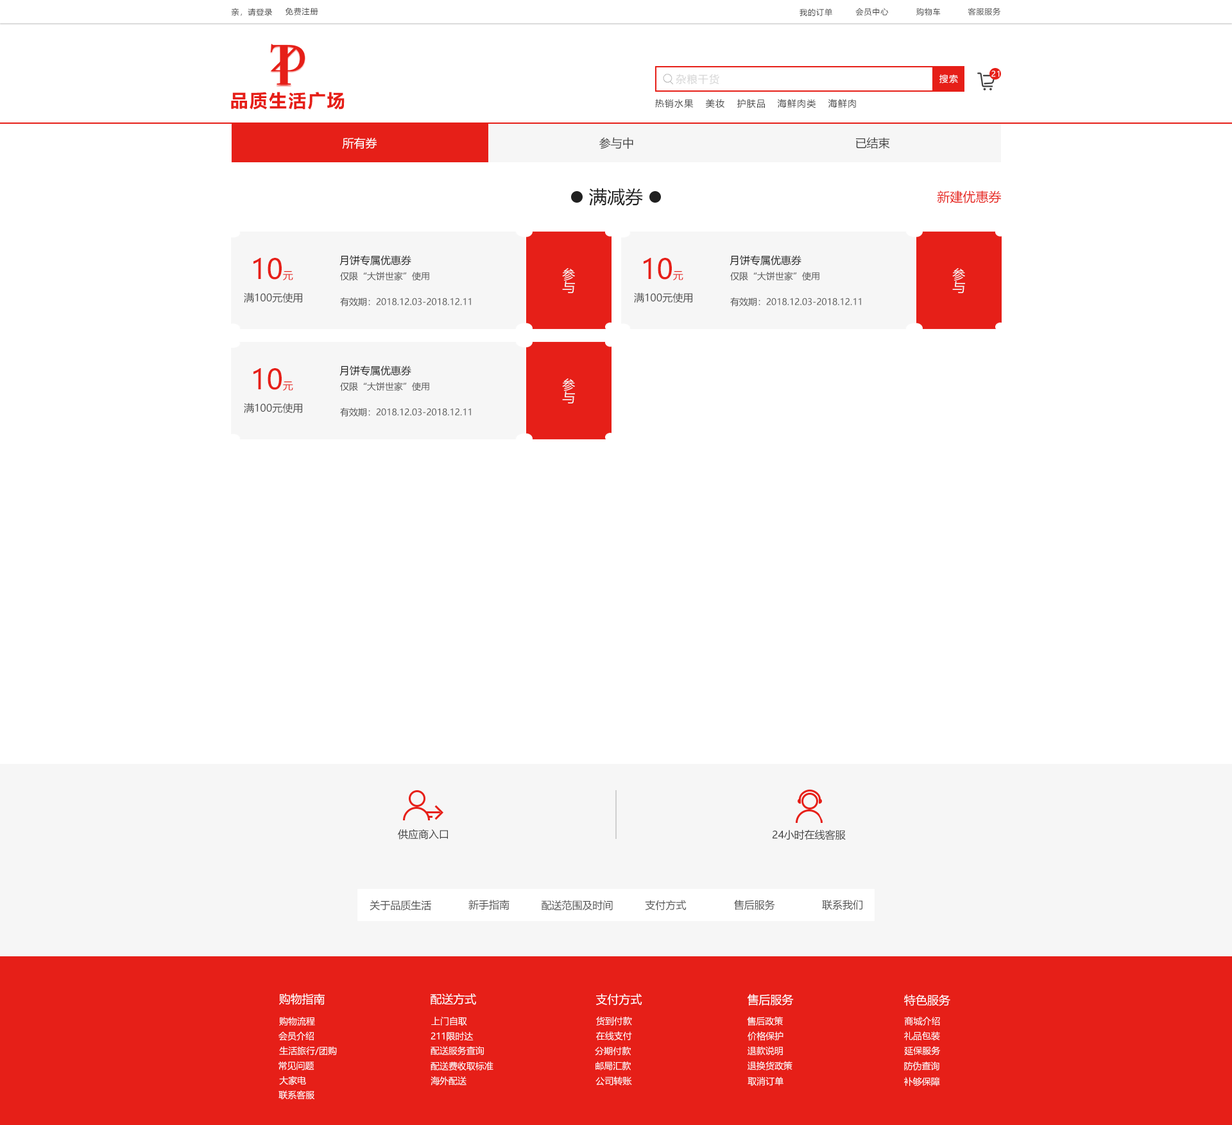
<style>
.page{position:relative;width:1232px;height:1125px;background:#ffffff}
.page>*{position:absolute;margin:0}
.t1{font:7.7px "MicrosoftYaHei";letter-spacing:0.08em;color:#404040}
.t2{font:10.3px "MicrosoftYaHei";letter-spacing:0.08em;color:#d6d6d6}
.t3{font:9px "MicrosoftYaHei";letter-spacing:0.08em;color:#ffffff}
.t4{font:7.7px "MicrosoftYaHei";letter-spacing:0.08em;color:#ffffff}
.t5{font:18px "MicrosoftYaHei-Bold";letter-spacing:0.08em;color:#e61f18}
.t6{font:9px "MicrosoftYaHei";letter-spacing:0.08em;color:#404040}
.t7{font:11.5px "MicrosoftYaHei";color:#ffffff}
.t8{font:11.5px "MicrosoftYaHei";color:#404040}
.t9{font:18px "MicrosoftYaHei";color:#202020}
.t10{font:12.8px "MicrosoftYaHei";color:#e61f18}
.t11{font:27.6px "MicrosoftYaHei";color:#e61f18}
.t12{font:10.3px "MicrosoftYaHei";color:#e61f18}
.t13{font:10.3px "MicrosoftYaHei";color:#202020}
.t14{font:12.8px "MicrosoftYaHei";color:#f7f7f7}
.t15{font:9px "MicrosoftYaHei";color:#505050}
.t16{font:10.3px "MicrosoftYaHei";color:#505050}
.t17{font:10.3px "MicrosoftYaHei";color:#404040}
.t18{font:9px "MicrosoftYaHei";color:#ffffff}
</style>
<div class="page">
<p class="t1" style="left:231px;top:8px;width:41px;height:8px">亲，请登录</p>
<p class="t1" style="left:285px;top:8px;width:33px;height:7px">免费注册</p>
<p class="t1" style="left:799px;top:8px;width:33px;height:8px">我的订单</p>
<p class="t1" style="left:855px;top:8px;width:34px;height:8px">会员中心</p>
<p class="t1" style="left:916px;top:8px;width:25px;height:8px">购物车</p>
<p class="t1" style="left:968px;top:8px;width:33px;height:7px">客服服务</p>
<p class="t2" style="left:676px;top:74px;width:43px;height:11px">杂粮干货</p>
<p class="t3" style="left:939px;top:74px;width:19px;height:9px">搜索</p>
<p class="t4" style="left:991px;top:71px;width:9px;height:6px">21</p>
<p class="t5" style="left:231px;top:92px;width:114px;height:18px">品质生活广场</p>
<p class="t6" style="left:655px;top:99px;width:39px;height:9px">热销水果</p>
<p class="t6" style="left:706px;top:99px;width:18px;height:9px">美妆</p>
<p class="t6" style="left:737px;top:99px;width:28px;height:9px">护肤品</p>
<p class="t6" style="left:777px;top:99px;width:39px;height:9px">海鲜肉类</p>
<p class="t6" style="left:828px;top:99px;width:28px;height:9px">海鲜肉</p>
<p class="t7" style="left:342px;top:137px;width:35px;height:12px">所有券</p>
<p class="t8" style="left:599px;top:137px;width:34px;height:12px">参与中</p>
<p class="t8" style="left:856px;top:137px;width:34px;height:12px">已结束</p>
<p class="t9" style="left:589px;top:188px;width:54px;height:18px">满减券</p>
<p class="t10" style="left:937px;top:191px;width:65px;height:12px">新建优惠券</p>
<p class="t11" style="left:253px;top:258px;width:40px;height:22px">10<span class="t12">元</span></p>
<p class="t13" style="left:339px;top:255px;width:72px;height:11px">月饼专属优惠券</p>
<p class="t11" style="left:644px;top:258px;width:39px;height:22px">10<span class="t12">元</span></p>
<p class="t13" style="left:730px;top:255px;width:71px;height:11px">月饼专属优惠券</p>
<p class="t14" style="left:562px;top:268px;width:13px;height:25px">参与</p>
<p class="t14" style="left:952px;top:268px;width:13px;height:25px">参与</p>
<p class="t15" style="left:340px;top:271px;width:89px;height:10px">仅限“大饼世家”使用</p>
<p class="t15" style="left:730px;top:271px;width:89px;height:10px">仅限“大饼世家”使用</p>
<p class="t16" style="left:244px;top:293px;width:58px;height:10px">满100元使用</p>
<p class="t16" style="left:634px;top:293px;width:58px;height:10px">满100元使用</p>
<p class="t15" style="left:340px;top:297px;width:131px;height:10px">有效期：2018.12.03-2018.12.11</p>
<p class="t15" style="left:730px;top:297px;width:131px;height:10px">有效期：2018.12.03-2018.12.11</p>
<p class="t13" style="left:339px;top:366px;width:72px;height:10px">月饼专属优惠券</p>
<p class="t11" style="left:253px;top:368px;width:40px;height:23px">10<span class="t12">元</span></p>
<p class="t15" style="left:340px;top:382px;width:89px;height:9px">仅限“大饼世家”使用</p>
<p class="t14" style="left:562px;top:379px;width:13px;height:25px">参与</p>
<p class="t16" style="left:244px;top:403px;width:58px;height:10px">满100元使用</p>
<p class="t15" style="left:340px;top:407px;width:131px;height:10px">有效期：2018.12.03-2018.12.11</p>
<p class="t17" style="left:398px;top:829px;width:50px;height:11px">供应商入口</p>
<p class="t17" style="left:772px;top:830px;width:74px;height:11px">24小时在线客服</p>
<p class="t16" style="left:370px;top:900px;width:61px;height:11px">关于品质生活</p>
<p class="t16" style="left:468px;top:900px;width:41px;height:10px">新手指南</p>
<p class="t16" style="left:542px;top:900px;width:71px;height:11px">配送范围及时间</p>
<p class="t16" style="left:645px;top:900px;width:42px;height:10px">支付方式</p>
<p class="t16" style="left:734px;top:900px;width:41px;height:10px">售后服务</p>
<p class="t16" style="left:822px;top:900px;width:40px;height:10px">联系我们</p>
<p class="t7" style="left:279px;top:994px;width:46px;height:11px">购物指南</p>
<p class="t7" style="left:431px;top:994px;width:45px;height:11px">配送方式</p>
<p class="t7" style="left:596px;top:994px;width:46px;height:11px">支付方式</p>
<p class="t7" style="left:747px;top:994px;width:47px;height:12px">售后服务</p>
<p class="t7" style="left:904px;top:994px;width:46px;height:13px">特色服务</p>
<p class="t18" style="left:279px;top:1017px;width:36px;height:9px">购物流程</p>
<p class="t18" style="left:431px;top:1017px;width:36px;height:9px">上门自取</p>
<p class="t18" style="left:596px;top:1017px;width:36px;height:9px">货到付款</p>
<p class="t18" style="left:747px;top:1017px;width:36px;height:9px">售后政策</p>
<p class="t18" style="left:904px;top:1017px;width:36px;height:9px">商城介绍</p>
<p class="t18" style="left:278px;top:1032px;width:36px;height:9px">会员介绍</p>
<p class="t18" style="left:431px;top:1032px;width:43px;height:9px">211限时达</p>
<p class="t18" style="left:596px;top:1032px;width:36px;height:9px">在线支付</p>
<p class="t18" style="left:747px;top:1032px;width:36px;height:9px">价格保护</p>
<p class="t18" style="left:904px;top:1032px;width:36px;height:9px">礼品包装</p>
<p class="t18" style="left:279px;top:1046px;width:58px;height:9px">生活旅行/团购</p>
<p class="t18" style="left:431px;top:1046px;width:53px;height:9px">配送服务查询</p>
<p class="t18" style="left:595px;top:1046px;width:36px;height:10px">分期付款</p>
<p class="t18" style="left:747px;top:1046px;width:36px;height:10px">退款说明</p>
<p class="t18" style="left:904px;top:1046px;width:37px;height:9px">延保服务</p>
<p class="t18" style="left:278px;top:1062px;width:36px;height:9px">常见问题</p>
<p class="t18" style="left:431px;top:1062px;width:62px;height:9px">配送费收取标准</p>
<p class="t18" style="left:595px;top:1062px;width:36px;height:9px">邮局汇款</p>
<p class="t18" style="left:747px;top:1061px;width:45px;height:10px">退换货政策</p>
<p class="t18" style="left:904px;top:1062px;width:35px;height:9px">防伪查询</p>
<p class="t18" style="left:279px;top:1076px;width:27px;height:10px">大家电</p>
<p class="t18" style="left:431px;top:1077px;width:35px;height:9px">海外配送</p>
<p class="t18" style="left:595px;top:1077px;width:37px;height:9px">公司转账</p>
<p class="t18" style="left:747px;top:1077px;width:36px;height:9px">取消订单</p>
<p class="t18" style="left:904px;top:1077px;width:36px;height:10px">补够保障</p>
<p class="t18" style="left:278px;top:1091px;width:36px;height:9px">联系客服</p>
</div>
